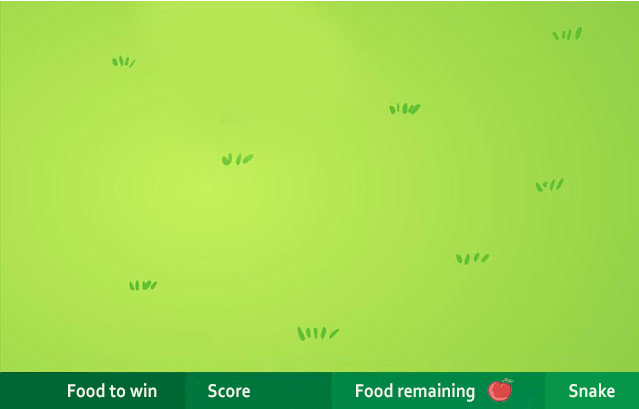
<style>
.page{position:relative;width:639px;height:409px}
.page>*{position:absolute;margin:0}
.t1{font:19.4px "Corbel-Bold";letter-spacing:0.015em;color:#ecf8ea;scale:0.89 1}
</style>
<div class="page">
<p class="t1" style="left:68px;top:383px;width:89px;height:15px">Food to win</p>
<p class="t1" style="left:208px;top:384px;width:42px;height:14px">Score</p>
<p class="t1" style="left:356px;top:383px;width:119px;height:19px">Food remaining</p>
<p class="t1" style="left:569px;top:383px;width:46px;height:15px">Snake</p>
</div>
